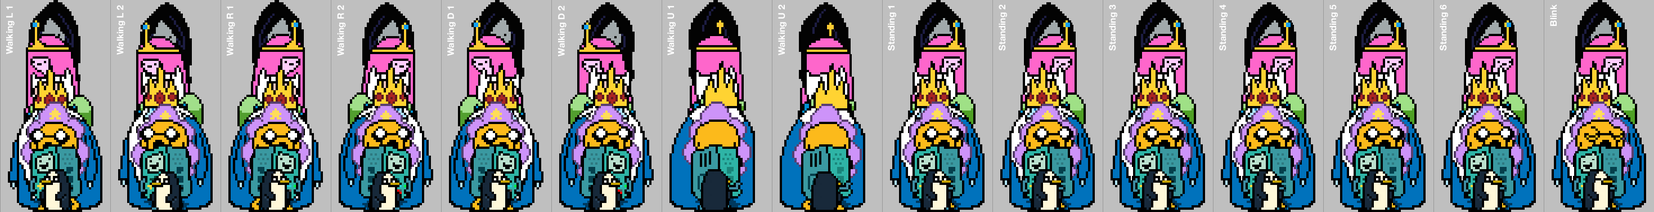
<style>
.page{position:relative;width:1654px;height:212px;background:#bfbfbf}
.page>*{position:absolute;margin:0}
.t1{font:9px "HelveticaNeue-Bold";color:#ffffff}
</style>
<div class="page">
<p class="t1" style="left:116px;top:5px;width:9px;height:50px;rotate:-90deg">Walking L 2</p>
<p class="t1" style="left:337px;top:5px;width:9px;height:51px;rotate:-90deg">Walking R 2</p>
<p class="t1" style="left:558px;top:6px;width:8px;height:50px;rotate:-90deg">Walking D 2</p>
<p class="t1" style="left:667px;top:6px;width:9px;height:49px;rotate:-90deg">Walking U 1</p>
<p class="t1" style="left:778px;top:4px;width:8px;height:51px;rotate:-90deg">Walking U 2</p>
<p class="t1" style="left:888px;top:6px;width:8px;height:45px;rotate:-90deg">Standing 1</p>
<p class="t1" style="left:998px;top:4px;width:9px;height:47px;rotate:-90deg">Standing 2</p>
<p class="t1" style="left:1109px;top:4px;width:8px;height:47px;rotate:-90deg">Standing 3</p>
<p class="t1" style="left:1219px;top:4px;width:8px;height:47px;rotate:-90deg">Standing 4</p>
<p class="t1" style="left:1329px;top:4px;width:9px;height:47px;rotate:-90deg">Standing 5</p>
<p class="t1" style="left:1439px;top:4px;width:9px;height:47px;rotate:-90deg">Standing 6</p>
<p class="t1" style="left:1550px;top:4px;width:6px;height:22px;rotate:-90deg">Blink</p>
<p class="t1" style="left:6px;top:6px;width:9px;height:48px;rotate:-90deg">Walking L 1</p>
<p class="t1" style="left:227px;top:6px;width:8px;height:50px;rotate:-90deg">Walking R 1</p>
<p class="t1" style="left:447px;top:6px;width:9px;height:50px;rotate:-90deg">Walking D 1</p>
</div>
